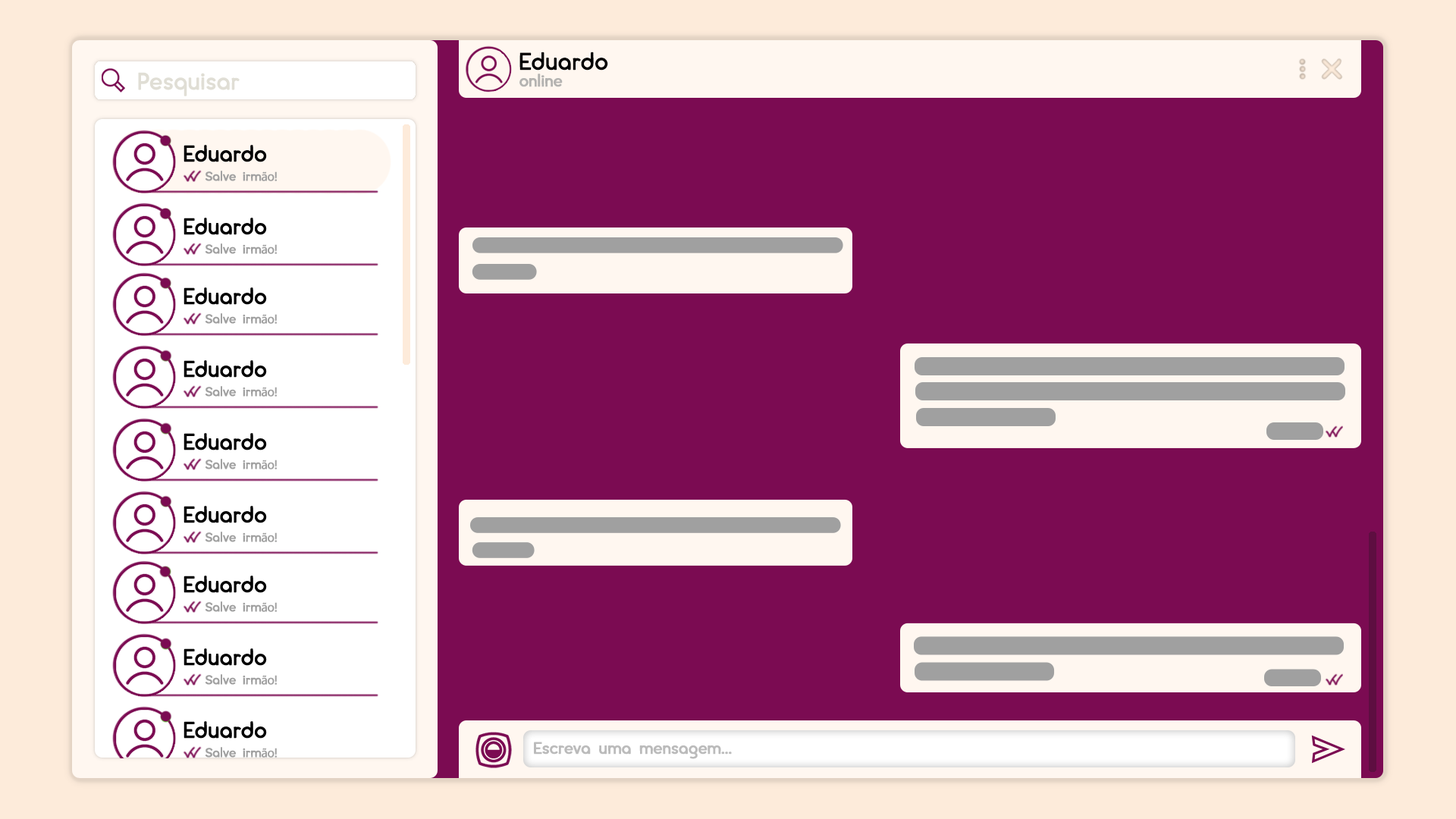
<style>
.page{position:relative;width:1456px;height:819px;background:#7b0b52}
.page>*{position:absolute;margin:0}
.t1{font:24.3px "cream-DEMO";letter-spacing:-0.04em;color:#000000;font-weight:bold}
.t2{font:24.3px "cream-DEMO";letter-spacing:-0.04em;color:#e0ded5;font-weight:bold}
.t3{font:16.7px "cream-DEMO";letter-spacing:-0.04em;color:#b4b3b1;font-weight:bold}
.t4{font:16.7px "cream-DEMO";letter-spacing:-0.04em;color:#bbbbbb;font-weight:bold}
</style>
<div class="page">
<p class="t1" style="left:519px;top:52px;width:89px;height:19px">Eduardo</p>
<p class="t2" style="left:138px;top:72px;width:102px;height:24px">Pesquisar</p>
<p class="t3" style="left:519px;top:74px;width:44px;height:13px">online</p>
<p class="t4" style="left:534px;top:742px;width:198px;height:17px">Escreva uma mensagem...</p>
</div>
